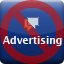
<style>
.page{position:relative;width:64px;height:64px}
.page>*{position:absolute;margin:0}
.t1{font:10px "LucidaGrande-Bold";color:#ffffff}
</style>
<div class="page">
<p class="t1" style="left:3px;top:36px;width:59px;height:10px">Advertising</p>
</div>
